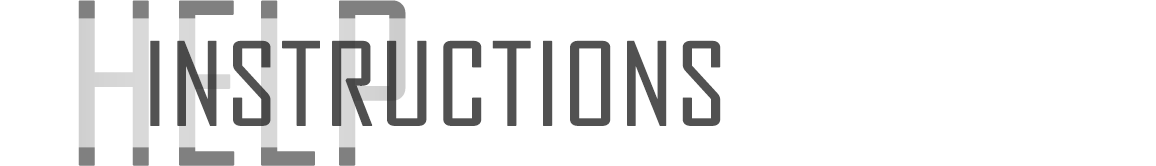
<style>
.page{position:relative;width:1156px;height:166px;background:#ffffff}
.page>*{position:absolute;margin:0}
.t1{font:214px "AgencyFB-Reg";text-transform:uppercase;font-weight:bold}
.t2{font:110px "AgencyFB-Reg";color:#515151;text-transform:uppercase;font-weight:bold;scale:1.1 1}
</style>
<div class="page">
<p class="t1" style="left:78px;top:0px;width:328px;height:166px">help</p>
<p class="t2" style="left:150px;top:40px;width:571px;height:86px">instructions</p>
</div>
